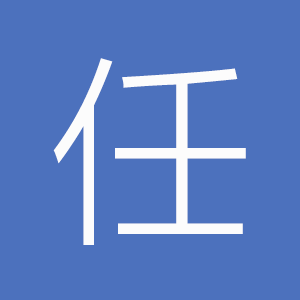
<style>
.page{position:relative;width:300px;height:300px;background:#4c71bd}
.page>*{position:absolute;margin:0}
.t1{font:201.5px "FZLTXHK--GBK1-0";color:#fcfcfc}
</style>
<div class="page">
<p class="t1" style="left:53px;top:58px;width:193px;height:187px">任</p>
</div>
